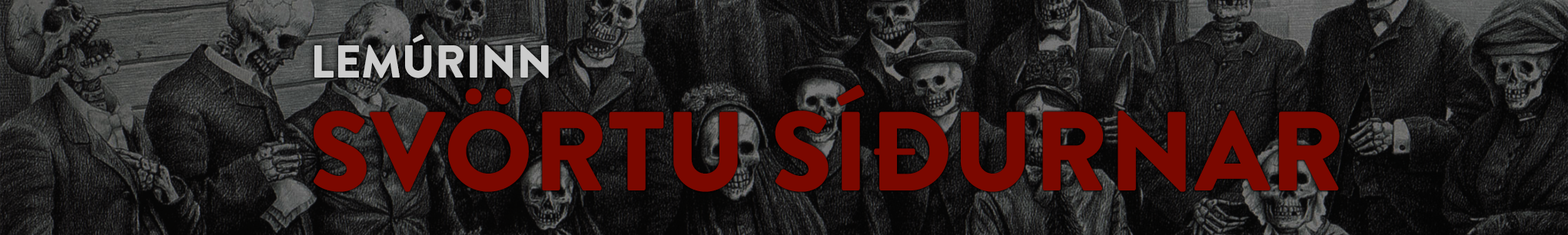
<style>
.page{position:relative;width:1568px;height:235px}
.page>*{position:absolute;margin:0}
.t1{font:46.1px "BrandonGrotesque-Black";color:#cccccc}
.t2{font:112.2px "BrandonGrotesque-Black";color:#7b0800}
</style>
<div class="page">
<p class="t1" style="left:314px;top:34px;width:235px;height:44px">LEMÚRINN</p>
<p class="t2" style="left:314px;top:85px;width:1026px;height:107px">SVÖRTU SÍÐURNAR</p>
</div>
